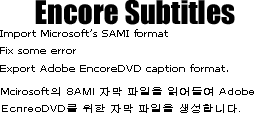
<style>
.page{position:relative;width:270px;height:120px;background:#ffffff}
.page>*{position:absolute;margin:0}
.t1{font:30px "Impact";color:#000000}
.t2{font:10px "Tahoma";color:#000000;scale:1.2 1}
.t3{font:10px "Gulim";color:#000000;scale:1.2 1}
</style>
<div class="page">
<p class="t1" style="left:35px;top:0px;width:200px;height:25px">Encore Subtitles</p>
<p class="t2" style="left:0px;top:29px;width:228px;height:45px">Import Microsoft’s SAMI format <br>Fix some error<br>Export Adobe EncoreDVD caption format.</p>
<p class="t3" style="left:1px;top:87px;width:253px;height:26px"><span class="t2">Mcirosoft</span>의 SAMI 자막 파일을 읽어들여 Adobe EcnreoDVD를 위한 자막 파일을 생성합니다.</p>
</div>
